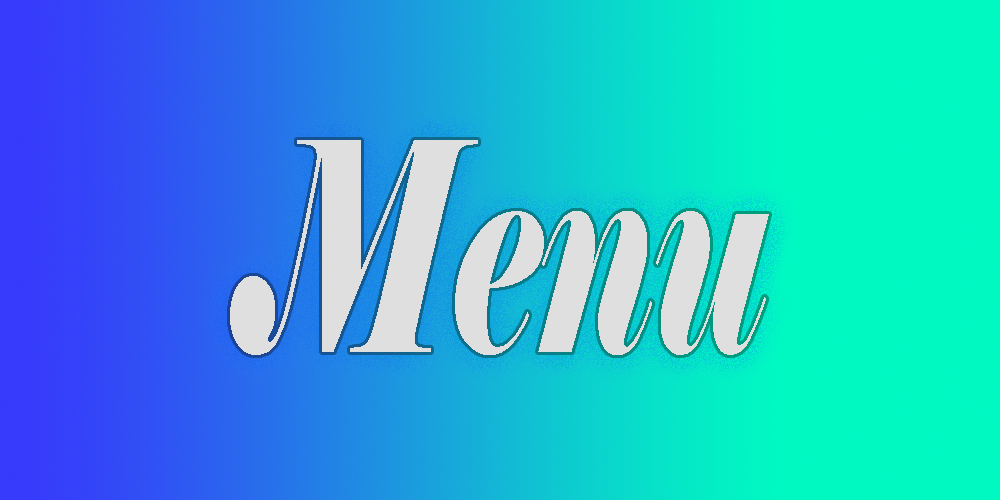
<style>
.page{position:relative;width:1000px;height:500px}
.page>*{position:absolute;margin:0}
.t1{font:291px "Elephant-Italic";color:#dfdfdf;scale:0.59 1}
</style>
<div class="page">
<p class="t1" style="left:230px;top:140px;width:539px;height:215px">Menu</p>
</div>
